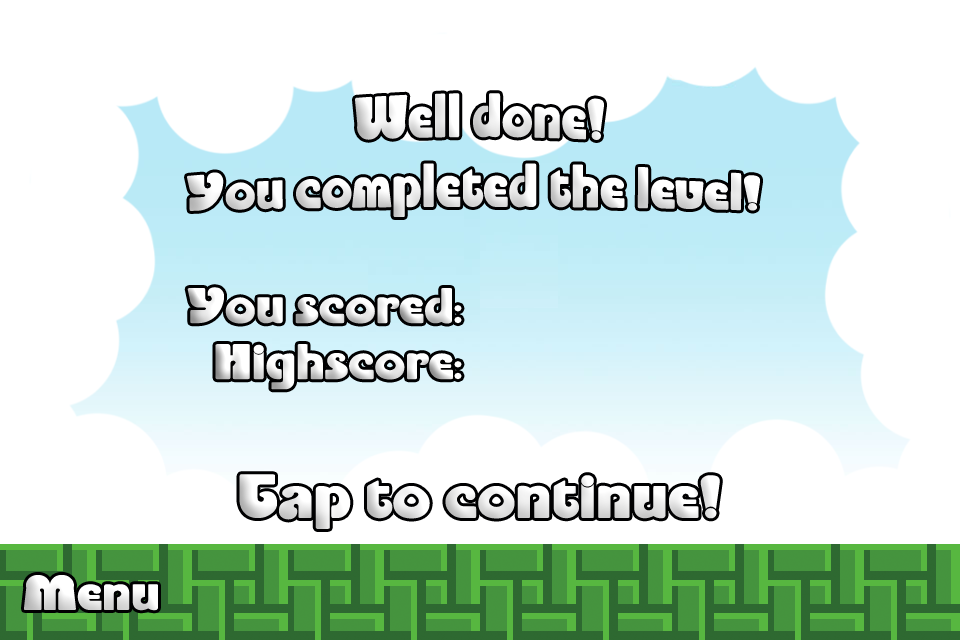
<style>
.page{position:relative;width:960px;height:640px;background:#ffffff}
.page>*{position:absolute;margin:0}
.t1{font:43.2px/56px "Enliven";color:#eeeeee;scale:1.11 1}
.t2{font:43.2px/56px "Enliven";color:#efefef;scale:1.11 1}
.t3{font:43.2px "Enliven";color:#ededed;scale:1.11 1}
</style>
<div class="page">
<p class="t1" style="left:187px;top:93px;width:573px;height:124px;text-align:center">Well done!<br>You completed the level!</p>
<p class="t2" style="left:187px;top:287px;width:275px;height:103px;text-align:right">You scored:<br>Highscore:</p>
<p class="t3" style="left:24px;top:575px;width:134px;height:36px">Menu</p>
</div>
